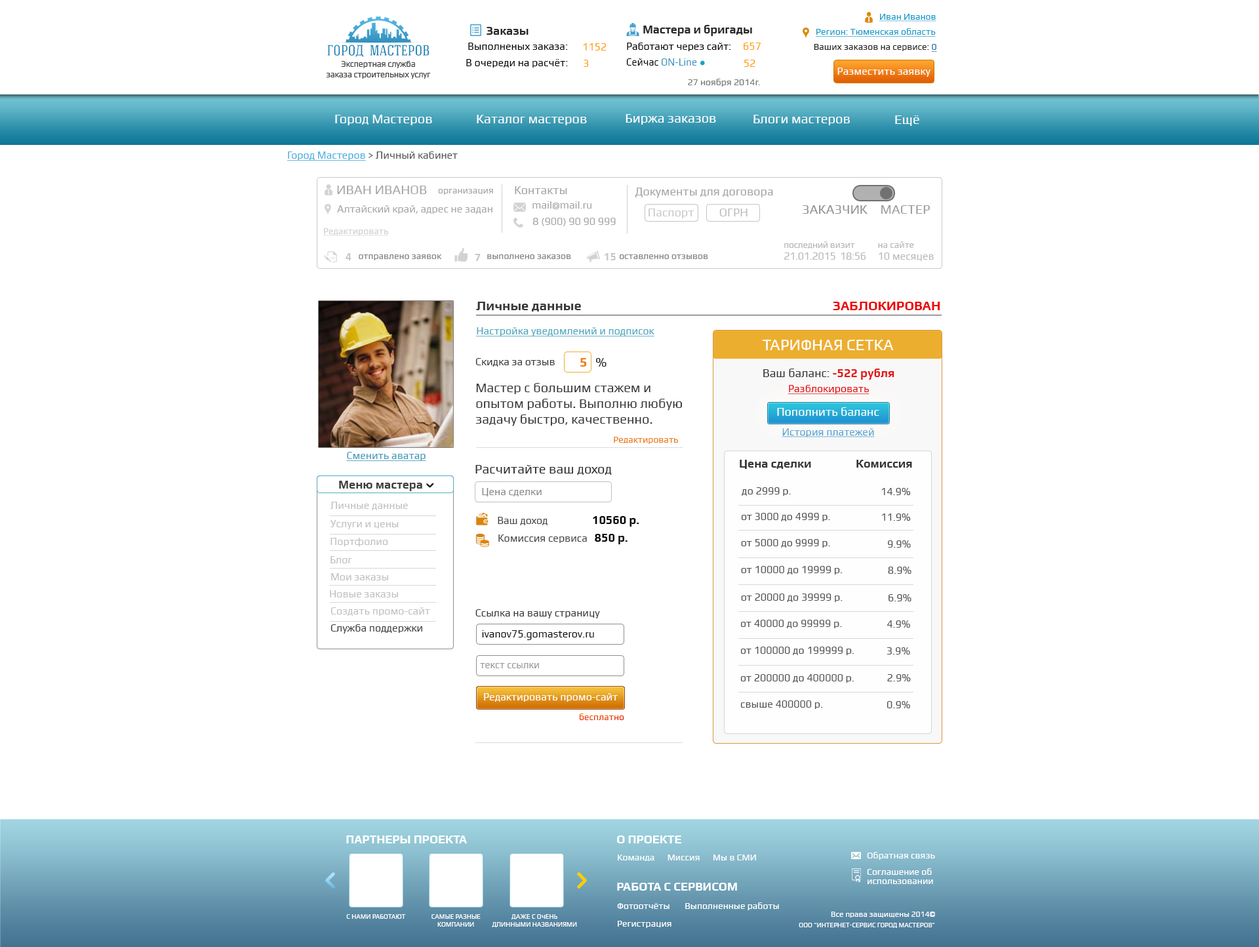
<style>
.page{position:relative;width:1259px;height:947px;background:#ffffff}
.page>*{position:absolute;margin:0}
.t1{font:9.2px "Play";color:#179ecb;text-decoration:underline}
.t2{font:11.8px "Play-Bold";color:#2a2a2a}
.t3{font:11.5px "Play-Bold";color:#2a2a2a}
.t4{font:9.2px "Play";color:#19a0cc;text-decoration:underline}
.t5{font:10.5px "Play";color:#000000}
.t6{font:10.4px "Play";color:#ff9e07}
.t7{font:10.5px "Play";color:#ff9e07}
.t8{font:9.2px "Play";color:#2a2a2a}
.t9{font:9.2px "Play";color:#226da7;text-decoration:underline}
.t10{font:8.5px "Play";letter-spacing:-0.016em;color:#403f3f}
.t11{font:10.5px "Play";color:#3c95bf;scale:0.95 1}
.t12{font:10.5px "Play";color:#000000;scale:0.95 1}
.t13{font:10.5px "Play";color:#ffffff}
.t14{font:9.2px "Play";color:#7a7a7a}
.t15{font:13.1px "Play";color:#ffffff}
.t16{font:10.5px "Play";color:#565656}
.t17{font:10.5px "Play";color:#4daeda;text-decoration:underline}
.t18{font:13.1px "Play";color:#a8a8a8}
.t19{font:9.2px "Play";color:#a8a8a8}
.t20{font:11.7px "Play";color:#a6a6a6}
.t21{font:11.8px "Play";color:#a6a6a6}
.t22{font:10.5px "Play";color:#a8a8a8}
.t23{font:10.4px "Play";color:#a6a6a6}
.t24{font:11.8px "Play";color:#cacaca}
.t25{font:11.8px "Play";color:#bdbdbd}
.t26{font:13.1px "Play";color:#919697}
.t27{font:13.1px "Play";color:#9f9f9f}
.t28{font:9.2px "Play";color:#d2d2d2;text-decoration:underline}
.t29{font:10.6px/11.8px "Play";letter-spacing:-0.02em;color:#b9b9b9}
.t30{font:9.3px/11.8px "Play";letter-spacing:-0.02em;color:#b9b9b9}
.t31{font:10.6px/11.8px "Play";color:#b9b9b9}
.t32{font:9.3px/11.8px "Play";color:#b9b9b9}
.t33{font:10.4px "Play-Bold";color:#c7c7c7}
.t34{font:9.2px "Play";color:#858585}
.t35{font:13.1px "Play-Bold";color:#393939}
.t36{font:13.1px "Play-Bold";color:#ed0000}
.t37{font:10.5px "Play";color:#4ba6bc;text-decoration:underline}
.t38{font:15.7px "Play";color:#ffffff}
.t39{font:10.5px "Play";color:#393939}
.t40{font:13.1px "Play-Bold";color:#ee7e18}
.t41{font:13.1px "Play";color:#202020}
.t42{font:11.8px "Play";color:#373636}
.t43{font:11.8px "Play-Bold";color:#e31a1a}
.t44{font:13.1px "Play";color:#393939}
.t45{font:10.5px "Play";color:#e30000;text-decoration:underline}
.t46{font:11.7px "Play";color:#ffffff}
.t47{font:9.2px "Play";color:#ee7e18}
.t48{font:10.5px "Play";color:#51a6d2;text-decoration:underline}
.t49{font:10.5px "Play";color:#439bb8;text-decoration:underline}
.t50{font:11.8px "Play-Bold";color:#373636}
.t51{font:13.1px "Play";color:#2f2f2f}
.t52{font:11.7px "Play-Bold";color:#3f3f3f}
.t53{font:10.5px "Play";color:#8b8b8b}
.t54{font:10.5px "Play";color:#484747}
.t55{font:10.5px "Play";color:#c1c1c1}
.t56{font:11.8px "Play-Bold";color:#000000}
.t57{font:10.6px "Play";color:#484747}
.t58{font:11.8px "Play-Bold";color:#0a0a0a}
.t59{font:10.3px "Play";color:#c1c1c1}
.t60{font:10.7px "Play";color:#c1c1c1}
.t61{font:10.4px "Play";color:#c1c1c1}
.t62{font:10.5px "Play";color:#3f3f3f}
.t63{font:10.5px "Play";color:#0e0e0e}
.t64{font:10.4px "Play";color:#484747}
.t65{font:9.8px "Play";color:#999999}
.t66{font:9.2px "Play";color:#ea3d03}
.t67{font:11.8px "Play-Bold";color:#ffffff;text-transform:uppercase}
.t68{font:9.2px "Play";color:#ffffff}
.t69{font:9.2px/6.6px "Play";color:#ffffff}
.t70{font:6.6px "Play";color:#ffffff;text-transform:uppercase}
.t71{font:6.6px/5.2px "Play";color:#ffffff;text-transform:uppercase}
.t72{font:6.6px "Play";color:#ffffff}
.t73{font:7.9px "Play";color:#ffffff}
</style>
<div class="page">
<p class="t1" style="left:879px;top:14px;width:58px;height:8px">Иван Иванов</p>
<p class="t2" style="left:487px;top:27px;width:42px;height:8px">Заказы</p>
<p class="t3" style="left:643px;top:25px;width:109px;height:11px">Мастера и бригады</p>
<p class="t4" style="left:816px;top:28px;width:120px;height:9px">Регион: Тюменская область</p>
<p class="t5" style="left:468px;top:43px;width:100px;height:7px">Выполненых заказа:</p>
<p class="t6" style="left:583px;top:43px;width:23px;height:7px">1152</p>
<p class="t5" style="left:627px;top:43px;width:104px;height:8px">Работают через сайт:</p>
<p class="t7" style="left:744px;top:43px;width:17px;height:7px">657</p>
<p class="t8" style="left:814px;top:44px;width:123px;height:8px">Ваших заказов на сервисе: <span class="t9">0</span></p>
<p class="t10" style="left:326px;top:61px;width:105px;height:18px;text-align:center">Экспертная служба <br>заказа строительных услуг</p>
<p class="t5" style="left:466px;top:59px;width:102px;height:9px">В очереди на расчёт:</p>
<p class="t6" style="left:584px;top:60px;width:5px;height:7px">3</p>
<p class="t11" style="left:626px;top:58px;width:71px;height:8px"><span class="t12">Сейчас </span>ON-Line</p>
<p class="t7" style="left:744px;top:60px;width:12px;height:7px">52</p>
<p class="t13" style="left:837px;top:68px;width:94px;height:9px">Разместить заявку</p>
<p class="t14" style="left:688px;top:79px;width:72px;height:8px">27 ноября 2014г.</p>
<p class="t15" style="left:335px;top:115px;width:97px;height:10px">Город Мастеров</p>
<p class="t15" style="left:477px;top:115px;width:110px;height:10px">Каталог мастеров</p>
<p class="t15" style="left:626px;top:114px;width:90px;height:11px">Биржа заказов</p>
<p class="t15" style="left:754px;top:115px;width:96px;height:10px">Блоги мастеров</p>
<p class="t15" style="left:895px;top:115px;width:24px;height:11px">Ещё</p>
<p class="t16" style="left:287px;top:151px;width:171px;height:10px"><span class="t17">Город Мастеров </span>&gt; Личный кабинет</p>
<p class="t18" style="left:337px;top:186px;width:90px;height:8px">ИВАН ИВАНОВ</p>
<p class="t19" style="left:438px;top:189px;width:55px;height:6px">организация</p>
<p class="t20" style="left:515px;top:186px;width:52px;height:8px">Контакты</p>
<p class="t21" style="left:635px;top:188px;width:138px;height:10px">Документы для договора</p>
<p class="t22" style="left:337px;top:205px;width:156px;height:9px">Алтайский край, адрес не задан</p>
<p class="t23" style="left:533px;top:201px;width:59px;height:8px">mail@mail.ru</p>
<p class="t24" style="left:649px;top:209px;width:46px;height:9px">Паспорт</p>
<p class="t25" style="left:719px;top:209px;width:29px;height:7px">ОГРН</p>
<p class="t26" style="left:803px;top:205px;width:65px;height:9px">ЗАКАЗЧИК</p>
<p class="t27" style="left:881px;top:205px;width:49px;height:9px">МАСТЕР</p>
<p class="t23" style="left:533px;top:218px;width:83px;height:9px">8 (900) 90 90 999</p>
<p class="t28" style="left:323px;top:228px;width:66px;height:8px">Редактировать</p>
<p class="t29" style="left:784px;top:241px;width:82px;height:19px"><span class="t30">последний визит<br></span>21.01.2015  18:56</p>
<p class="t31" style="left:878px;top:241px;width:56px;height:20px"><span class="t32">на сайте<br></span>10 месяцев</p>
<p class="t33" style="left:346px;top:253px;width:6px;height:7px">4</p>
<p class="t34" style="left:359px;top:254px;width:83px;height:6px">отправлено заявок</p>
<p class="t33" style="left:475px;top:254px;width:6px;height:7px">7</p>
<p class="t34" style="left:487px;top:254px;width:84px;height:5px">выполнено заказов</p>
<p class="t33" style="left:605px;top:253px;width:11px;height:7px">15</p>
<p class="t34" style="left:620px;top:254px;width:88px;height:5px">оставленно отзывов</p>
<p class="t35" style="left:476px;top:302px;width:105px;height:10px">Личные данные</p>
<p class="t36" style="left:833px;top:302px;width:107px;height:8px">ЗАБЛОКИРОВАН</p>
<p class="t37" style="left:476px;top:327px;width:179px;height:9px">Настройка уведомлений и подписок</p>
<p class="t38" style="left:762px;top:340px;width:132px;height:10px">ТАРИФНАЯ СЕТКА</p>
<p class="t39" style="left:475px;top:358px;width:80px;height:9px">Скидка за отзыв 5%</p>
<p class="t40" style="left:580px;top:358px;width:7px;height:9px">5</p>
<p class="t41" style="left:596px;top:358px;width:11px;height:9px">%</p>
<p class="t42" style="left:763px;top:369px;width:132px;height:11px">Ваш баланс: <span class="t43">-522 рубля</span></p>
<p class="t44" style="left:475px;top:383px;width:207px;height:43px">Мастер с большим стажем и опытом работы. Выполню любую задачу быстро, качественно.</p>
<p class="t45" style="left:788px;top:385px;width:82px;height:9px">Разблокировать</p>
<p class="t46" style="left:777px;top:407px;width:102px;height:9px">Пополнить баланс</p>
<p class="t47" style="left:614px;top:437px;width:64px;height:7px">Редактировать</p>
<p class="t48" style="left:782px;top:428px;width:93px;height:9px">История платежей</p>
<p class="t49" style="left:346px;top:452px;width:80px;height:9px">Сменить аватар</p>
<p class="t50" style="left:740px;top:460px;width:71px;height:9px">Цена сделки</p>
<p class="t50" style="left:856px;top:460px;width:56px;height:8px">Комиссия</p>
<p class="t51" style="left:475px;top:465px;width:137px;height:10px">Расчитайте ваш доход</p>
<p class="t52" style="left:339px;top:481px;width:83px;height:10px">Меню мастера</p>
<p class="t53" style="left:482px;top:488px;width:60px;height:8px">Цена сделки</p>
<p class="t54" style="left:742px;top:487px;width:49px;height:9px">до 2999 р.</p>
<p class="t54" style="left:881px;top:488px;width:30px;height:7px">14.9%</p>
<p class="t55" style="left:330px;top:502px;width:78px;height:8px">Личные данные</p>
<p class="t55" style="left:331px;top:520px;width:68px;height:9px">Услуги и цены</p>
<p class="t54" style="left:498px;top:517px;width:50px;height:8px">Ваш доход</p>
<p class="t56" style="left:593px;top:516px;width:46px;height:11px">10560 р.</p>
<p class="t57" style="left:741px;top:513px;width:89px;height:8px">от 3000 до 4999 р.</p>
<p class="t57" style="left:882px;top:514px;width:29px;height:7px">11.9%</p>
<p class="t58" style="left:595px;top:534px;width:33px;height:10px">850 р.</p>
<p class="t55" style="left:331px;top:538px;width:57px;height:8px">Портфолио</p>
<p class="t54" style="left:498px;top:534px;width:89px;height:9px">Комиссия сервиса</p>
<p class="t54" style="left:741px;top:539px;width:89px;height:9px">от 5000 до 9999 р.</p>
<p class="t54" style="left:888px;top:540px;width:23px;height:8px">9.9%</p>
<p class="t55" style="left:331px;top:556px;width:21px;height:7px">Блог</p>
<p class="t54" style="left:741px;top:566px;width:102px;height:8px">от 10000 до 19999 р.</p>
<p class="t54" style="left:888px;top:567px;width:24px;height:7px">8.9%</p>
<p class="t59" style="left:331px;top:573px;width:57px;height:7px">Мои заказы</p>
<p class="t60" style="left:330px;top:590px;width:68px;height:7px">Новые заказы</p>
<p class="t57" style="left:741px;top:594px;width:102px;height:8px">от 20000 до 39999 р.</p>
<p class="t57" style="left:889px;top:594px;width:23px;height:7px">6.9%</p>
<p class="t61" style="left:331px;top:607px;width:99px;height:9px">Создать промо-сайт</p>
<p class="t39" style="left:475px;top:609px;width:125px;height:9px">Ссылка на вашу страницу</p>
<p class="t62" style="left:331px;top:624px;width:91px;height:10px">Служба поддержки</p>
<p class="t57" style="left:740px;top:620px;width:102px;height:8px">от 40000 до 99999 р.</p>
<p class="t57" style="left:887px;top:620px;width:23px;height:8px">4.9%</p>
<p class="t63" style="left:482px;top:630px;width:112px;height:10px">ivanov75.gomasterov.ru</p>
<p class="t64" style="left:740px;top:647px;width:115px;height:8px">от 100000 до 199999 р.</p>
<p class="t64" style="left:887px;top:647px;width:23px;height:8px">3.9%</p>
<p class="t65" style="left:480px;top:663px;width:59px;height:5px">текст ссылки</p>
<p class="t57" style="left:740px;top:674px;width:114px;height:9px">от 200000 до 400000 р.</p>
<p class="t57" style="left:887px;top:674px;width:24px;height:7px">2.9%</p>
<p class="t13" style="left:484px;top:693px;width:134px;height:9px">Редактировать промо-сайт</p>
<p class="t57" style="left:740px;top:700px;width:83px;height:9px">свыше 400000 р.</p>
<p class="t57" style="left:887px;top:701px;width:23px;height:7px">0.9%</p>
<p class="t66" style="left:579px;top:714px;width:45px;height:6px">бесплатно</p>
<p class="t67" style="left:346px;top:836px;width:121px;height:7px">Партнеры проекта</p>
<p class="t67" style="left:617px;top:836px;width:64px;height:7px">О проекте</p>
<p class="t68" style="left:618px;top:855px;width:138px;height:6px">Команда      Миссия      Мы в СМИ</p>
<p class="t68" style="left:867px;top:852px;width:68px;height:8px">Обратная связь</p>
<p class="t69" style="left:867px;top:868px;width:66px;height:16px;text-align:justify">Соглашение об <br>использовании</p>
<p class="t67" style="left:617px;top:883px;width:120px;height:8px">Работа с сервисом</p>
<p class="t68" style="left:617px;top:902px;width:162px;height:8px">Фотоотчёты       Выполненные работы</p>
<p class="t70" style="left:346px;top:914px;width:60px;height:5px">C нами работают</p>
<p class="t71" style="left:432px;top:914px;width:49px;height:13px;text-align:center">Самые разные<br>компании</p>
<p class="t71" style="left:492px;top:914px;width:85px;height:13px;text-align:center">Даже с очень<br>длинными названиями</p>
<p class="t72" style="left:799px;top:912px;width:136px;height:16px;text-align:right"><span class="t73">Все права защищены 2014©<br></span>ООО “ИНТЕРНЕТ-СЕРВИС ГОРОД МАСТЕРОВ”</p>
<p class="t68" style="left:618px;top:921px;width:54px;height:7px">Регистрация</p>
</div>
